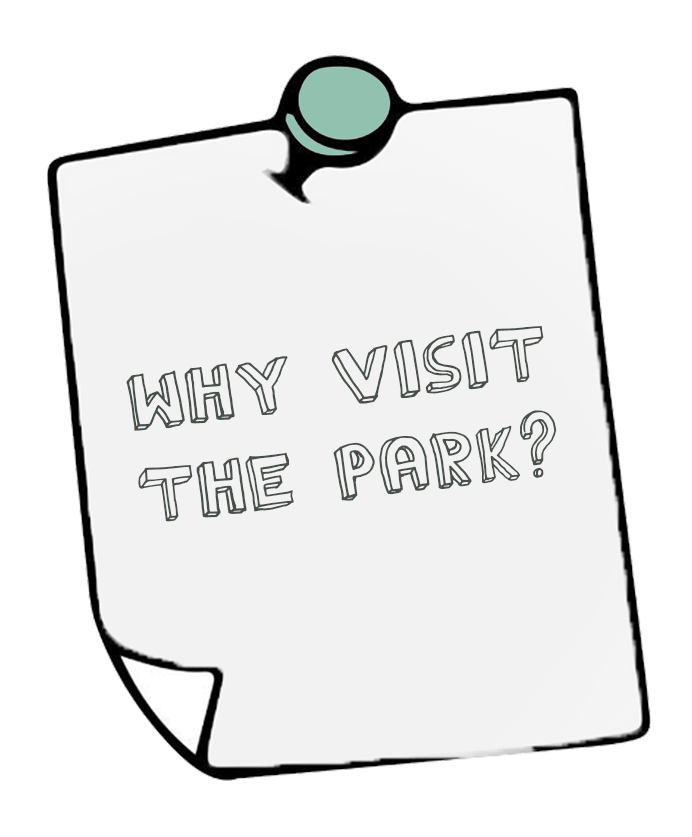
<style>
.page{position:relative;width:692px;height:837px;background:#ffffff}
.page>*{position:absolute;margin:0}
.t1{font:78.9px "TheRainmaker";color:#475149}
</style>
<div class="page">
<p class="t1" style="left:126px;top:326px;width:431px;height:196px;text-align:center;rotate:-7deg">Why visit<br>The Park?</p>
</div>
